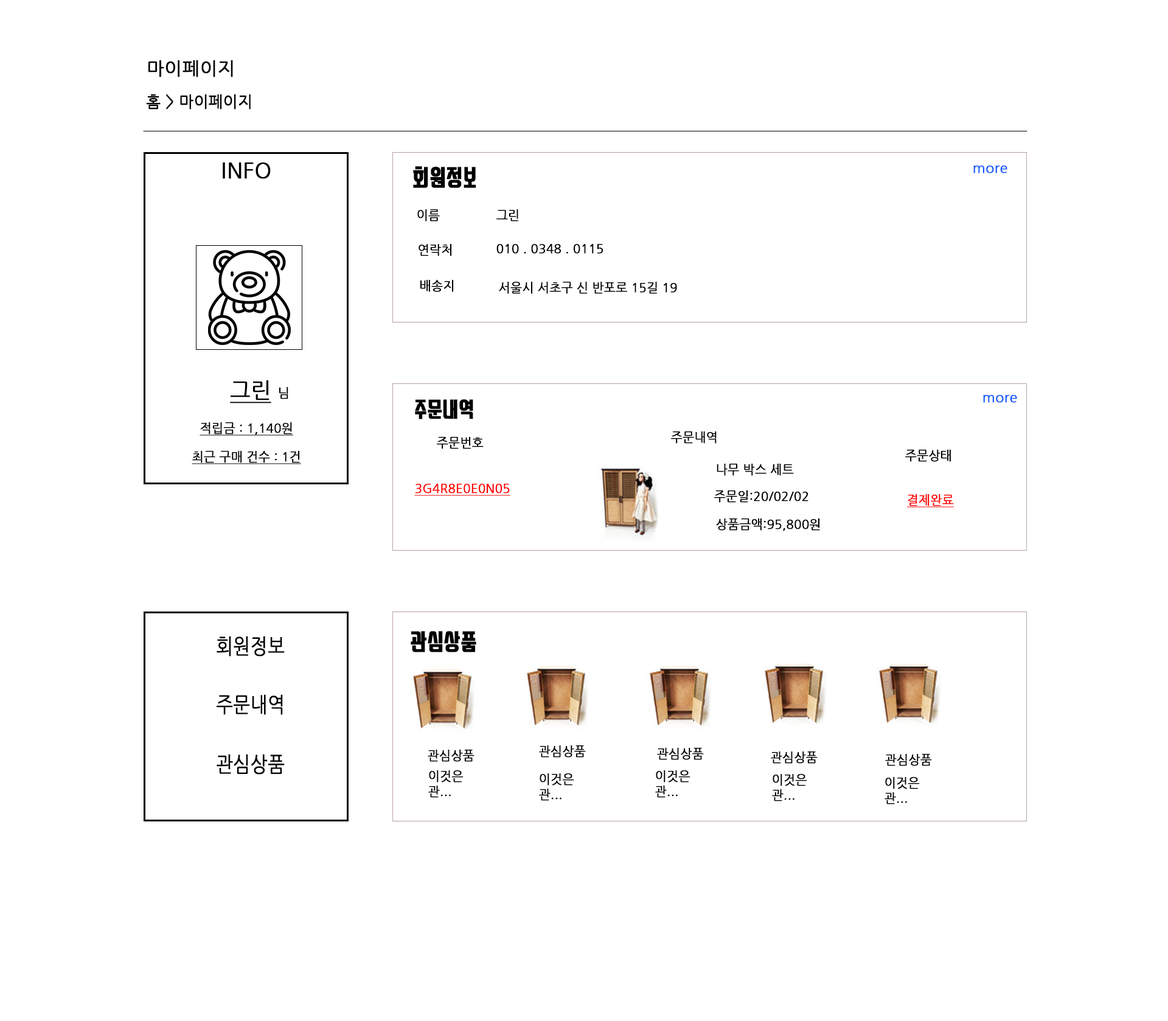
<style>
.page{position:relative;width:1168px;height:1021px;background:#ffffff}
.page>*{position:absolute;margin:0}
.t1{font:18.3px "NanumGothic";color:#000000;font-weight:bold}
.t2{font:15.2px "NanumGothic";color:#000000;font-weight:bold}
.t3{font:21.3px "NanumGothic";color:#000000;font-weight:bold}
.t4{font:26.2px "SwaggerTTF";color:#000000;font-weight:bold}
.t5{font:14px "NanumGothic";color:#125bff;font-weight:bold}
.t6{font:12.2px "NanumGothic";color:#000000;font-weight:bold}
.t7{font:21.3px "NanumGothic";color:#000000;font-weight:bold;text-decoration:underline}
.t8{font:24.3px "SwaggerTTF";color:#000000;font-weight:bold}
.t9{font:12.2px "NanumGothic";color:#000000;font-weight:bold;text-decoration:underline}
.t10{font:12.2px "NanumGothic";color:#ff0000;font-weight:bold;text-decoration:underline}
.t11{font:21.3px "NanumGothic";color:#000000;font-weight:bold;scale:0.84 1}
.t12{font:12.2px/15.2px "NanumGothic";color:#000000;font-weight:bold}
</style>
<div class="page">
<p class="t1" style="left:148px;top:60px;width:85px;height:17px">마이페이지</p>
<p class="t2" style="left:146px;top:94px;width:105px;height:16px">홈 &gt; 마이페이지</p>
<p class="t3" style="left:223px;top:162px;width:48px;height:17px">INFO</p>
<p class="t4" style="left:413px;top:166px;width:63px;height:22px">회원정보</p>
<p class="t5" style="left:973px;top:165px;width:34px;height:8px">more</p>
<p class="t6" style="left:417px;top:209px;width:23px;height:12px">이름</p>
<p class="t6" style="left:496px;top:209px;width:23px;height:12px">그린</p>
<p class="t6" style="left:419px;top:244px;width:33px;height:12px">연락처</p>
<p class="t6" style="left:496px;top:244px;width:108px;height:10px">010 . 0348 . 0115</p>
<p class="t6" style="left:420px;top:280px;width:34px;height:12px">배송지</p>
<p class="t6" style="left:499px;top:282px;width:178px;height:12px">서울시 서초구 신 반포로 15길 19</p>
<p class="t7" style="left:230px;top:380px;width:58px;height:23px">그린 <span class="t6">님</span></p>
<p class="t8" style="left:415px;top:399px;width:58px;height:20px">주문내역</p>
<p class="t5" style="left:983px;top:395px;width:34px;height:8px">more</p>
<p class="t9" style="left:200px;top:422px;width:93px;height:14px">적립금 : 1,140원</p>
<p class="t6" style="left:437px;top:437px;width:47px;height:12px">주문번호</p>
<p class="t6" style="left:671px;top:431px;width:46px;height:13px">주문내역</p>
<p class="t6" style="left:905px;top:450px;width:46px;height:12px">주문상태</p>
<p class="t9" style="left:192px;top:451px;width:109px;height:13px">최근 구매 건수 : 1건</p>
<p class="t6" style="left:717px;top:464px;width:77px;height:12px">나무 박스 세트</p>
<p class="t10" style="left:414px;top:484px;width:96px;height:12px">3G4R8E0E0N05</p>
<p class="t6" style="left:714px;top:490px;width:95px;height:13px">주문일:20/02/02</p>
<p class="t10" style="left:906px;top:494px;width:48px;height:13px">결제완료</p>
<p class="t6" style="left:716px;top:518px;width:104px;height:13px">상품금액:95,800원</p>
<p class="t11" style="left:217px;top:636px;width:68px;height:20px">회원정보</p>
<p class="t4" style="left:411px;top:631px;width:65px;height:21px">관심상품</p>
<p class="t11" style="left:217px;top:694px;width:66px;height:21px">주문내역</p>
<p class="t6" style="left:428px;top:750px;width:47px;height:12px">관심상품</p>
<p class="t6" style="left:539px;top:745px;width:47px;height:12px">관심상품</p>
<p class="t6" style="left:657px;top:748px;width:47px;height:12px">관심상품</p>
<p class="t11" style="left:217px;top:754px;width:68px;height:20px">관심상품</p>
<p class="t6" style="left:771px;top:751px;width:47px;height:13px">관심상품</p>
<p class="t6" style="left:885px;top:754px;width:47px;height:12px">관심상품</p>
<p class="t12" style="left:428px;top:770px;width:36px;height:28px">이것은<br>관...</p>
<p class="t12" style="left:539px;top:773px;width:35px;height:28px">이것은<br>관...</p>
<p class="t12" style="left:655px;top:770px;width:36px;height:28px">이것은<br>관...</p>
<p class="t12" style="left:772px;top:774px;width:35px;height:27px">이것은<br>관...</p>
<p class="t12" style="left:885px;top:777px;width:35px;height:27px">이것은<br>관...</p>
</div>
